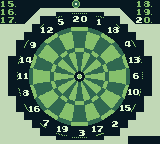
<style>
.page{position:relative;width:160px;height:144px;background:#071821}
.page>*{position:absolute;margin:0}
.t1{font:8px/8px "Early-GameBoy";color:#86c06c}
.t2{font:8px/8px "Early-GameBoy";color:#e0f8cf}
.t3{font:8px "Early-GameBoy";letter-spacing:-0.12em;color:#e0f8cf}
.t4{font:8px "Early-GameBoy";color:#e0f8cf}
.t5{font:8px "Early-GameBoy";letter-spacing:-0.24em;color:#e0f8cf}
.t6{font:8px "Early-GameBoy";letter-spacing:-0.18em;color:#e0f8cf}
.t7{font:8px "Early-GameBoy";letter-spacing:-0.34em;color:#e0f8cf}
</style>
<div class="page">
<p class="t1" style="left:1px;top:1px;width:13px;height:22px">15<br>16<br>17</p>
<p class="t1" style="left:136px;top:1px;width:14px;height:22px">18<br>19<br><span class="t2">2</span>0</p>
<p class="t3" style="left:73px;top:16px;width:14px;height:6px">20</p>
<p class="t3" style="left:41px;top:27px;width:12px;height:6px">12</p>
<p class="t4" style="left:58px;top:19px;width:6px;height:6px">5</p>
<p class="t5" style="left:97px;top:19px;width:4px;height:6px">1</p>
<p class="t5" style="left:108px;top:27px;width:11px;height:6px">18</p>
<p class="t5" style="left:125px;top:41px;width:6px;height:6px">4</p>
<p class="t4" style="left:30px;top:42px;width:6px;height:6px">9</p>
<p class="t6" style="left:20px;top:57px;width:12px;height:6px">14</p>
<p class="t5" style="left:129px;top:57px;width:11px;height:6px">13</p>
<p class="t7" style="left:18px;top:73px;width:10px;height:6px">11</p>
<p class="t5" style="left:133px;top:73px;width:6px;height:6px">6</p>
<p class="t5" style="left:128px;top:89px;width:11px;height:6px">10</p>
<p class="t3" style="left:23px;top:90px;width:6px;height:6px">8</p>
<p class="t5" style="left:29px;top:106px;width:11px;height:6px">16</p>
<p class="t5" style="left:120px;top:105px;width:11px;height:6px">15</p>
<p class="t5" style="left:43px;top:120px;width:6px;height:6px">7</p>
<p class="t5" style="left:57px;top:126px;width:11px;height:6px">19</p>
<p class="t5" style="left:92px;top:126px;width:11px;height:6px">17</p>
<p class="t5" style="left:112px;top:121px;width:6px;height:6px">2</p>
<p class="t5" style="left:79px;top:130px;width:6px;height:6px">3</p>
</div>
